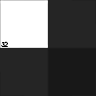
<style>
.page{position:relative;width:96px;height:96px;background:#252525}
.page>*{position:absolute;margin:0}
.t1{font:6.7px "Stark";color:#000000}
</style>
<div class="page">
<p class="t1" style="left:1px;top:41px;width:7px;height:6px">32</p>
</div>
